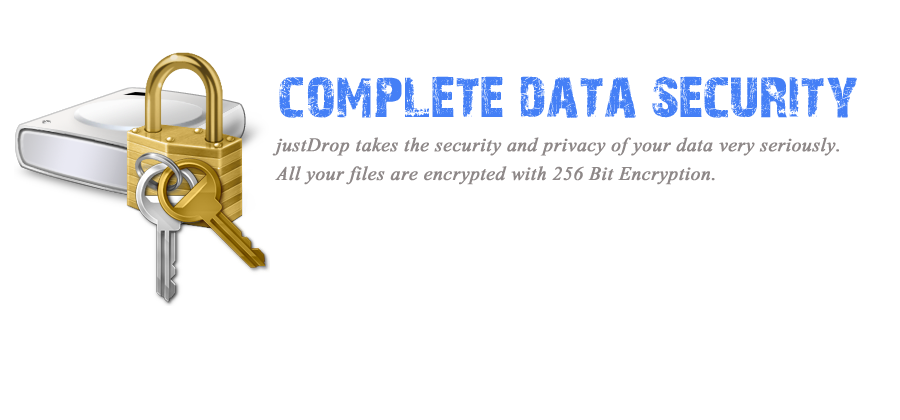
<style>
.page{position:relative;width:900px;height:420px;background:#ffffff}
.page>*{position:absolute;margin:0}
.t1{font:60px "28DaysLater";color:#447ff6}
.t2{font:24px "Aparajita-Italic";color:#8e8888;font-weight:bold}
</style>
<div class="page">
<p class="t1" style="left:279px;top:76px;width:578px;height:42px">complete data security</p>
<p class="t2" style="left:272px;top:137px;width:567px;height:48px">justDrop takes the security and privacy of your data very seriously. <br>All your files are encrypted with 256 Bit Encryption.</p>
</div>
